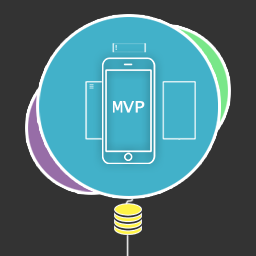
<style>
.page{position:relative;width:256px;height:256px;background:#333333}
.page>*{position:absolute;margin:0}
.t1{font:18px "LucidaConsole";color:#ffffff}
</style>
<div class="page">
<p class="t1" style="left:113px;top:101px;width:32px;height:12px">MVP</p>
</div>
